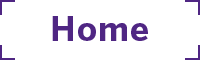
<style>
.page{position:relative;width:200px;height:60px;background:#ffffff}
.page>*{position:absolute;margin:0}
.t1{font:33.2px "BentonSans-Bold";letter-spacing:0.03em;color:#4f2683}
</style>
<div class="page">
<p class="t1" style="left:52px;top:16px;width:96px;height:25px">Home</p>
</div>
